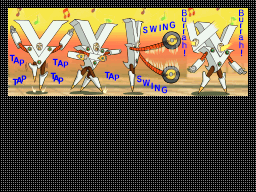
<style>
.page{position:relative;width:256px;height:192px;background:#000000}
.page>*{position:absolute;margin:0}
.t1{font:8px "WiiNTLGPGothic-Regular";letter-spacing:0.01em;color:#0000ff}
.t2{font:8px "SCEPS3RodinLATIN2-Bold";letter-spacing:0.01em;color:#0000ff}
.t3{font:8px "SCEPS3RodinLATIN2-Bold";letter-spacing:0.01em}
.t4{font:8px "WiiNTLGPGothic-Regular";letter-spacing:0.01em}
</style>
<div class="page">
<p class="t1" style="left:182px;top:9px;width:5px;height:8px">B</p>
<p class="t1" style="left:182px;top:17px;width:5px;height:6px">u</p>
<p class="t1" style="left:239px;top:9px;width:5px;height:8px">B</p>
<p class="t1" style="left:239px;top:17px;width:5px;height:6px">u</p>
<p class="t2" style="left:142px;top:26px;width:6px;height:8px">S</p>
<p class="t2" style="left:149px;top:25px;width:8px;height:8px">W</p>
<p class="t3" style="left:159px;top:24px;width:2px;height:8px">I</p>
<p class="t2" style="left:162px;top:23px;width:6px;height:8px">N</p>
<p class="t2" style="left:169px;top:21px;width:7px;height:8px">G</p>
<p class="t1" style="left:183px;top:23px;width:3px;height:6px">r</p>
<p class="t1" style="left:183px;top:29px;width:3px;height:6px">r</p>
<p class="t1" style="left:240px;top:23px;width:3px;height:6px">r</p>
<p class="t1" style="left:240px;top:29px;width:3px;height:6px">r</p>
<p class="t1" style="left:181px;top:35px;width:6px;height:6px">a</p>
<p class="t4" style="left:182px;top:41px;width:5px;height:8px">h</p>
<p class="t1" style="left:238px;top:35px;width:6px;height:6px">a</p>
<p class="t4" style="left:239px;top:41px;width:5px;height:8px">h</p>
<p class="t2" style="left:9px;top:54px;width:6px;height:8px">T</p>
<p class="t1" style="left:184px;top:49px;width:2px;height:8px">!</p>
<p class="t1" style="left:241px;top:49px;width:2px;height:8px">!</p>
<p class="t2" style="left:13px;top:57px;width:7px;height:7px">A</p>
<p class="t2" style="left:19px;top:59px;width:6px;height:7px">P</p>
<p class="t2" style="left:52px;top:58px;width:6px;height:8px">T</p>
<p class="t2" style="left:57px;top:60px;width:7px;height:7px">A</p>
<p class="t2" style="left:63px;top:61px;width:6px;height:7px">P</p>
<p class="t2" style="left:104px;top:71px;width:6px;height:8px">T</p>
<p class="t2" style="left:108px;top:73px;width:7px;height:7px">A</p>
<p class="t2" style="left:114px;top:74px;width:6px;height:7px">P</p>
<p class="t2" style="left:136px;top:75px;width:6px;height:8px">S</p>
<p class="t2" style="left:142px;top:79px;width:8px;height:8px">W</p>
<p class="t3" style="left:151px;top:82px;width:2px;height:8px">I</p>
<p class="t2" style="left:154px;top:84px;width:6px;height:8px">N</p>
<p class="t2" style="left:161px;top:86px;width:7px;height:8px">G</p>
</div>
